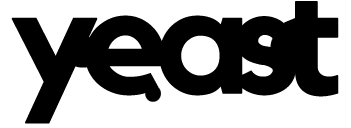
<style>
.page{position:relative;width:351px;height:128px;background:#ffffff}
.page>*{position:absolute;margin:0}
.t1{font:150.3px "Kollektif-Bold";letter-spacing:-0.14em;color:#000000;font-weight:bold}
</style>
<div class="page">
<p class="t1" style="left:11px;top:1px;width:328px;height:123px">yeast</p>
</div>
